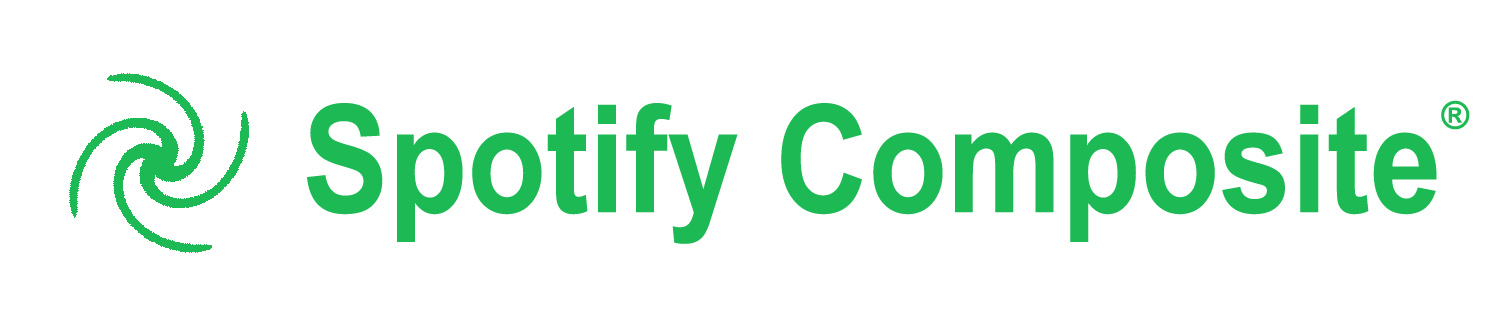
<style>
.page{position:relative;width:1512px;height:324px;background:#ffffff}
.page>*{position:absolute;margin:0}
.t1{font:149.8px "ArialNarrow-Bold";color:#1db954;scale:1.05 1}
.t2{font:65px "ArialNarrow-Bold";color:#1db954;scale:1.2 1}
</style>
<div class="page">
<p class="t1" style="left:307px;top:100px;width:1163px;height:144px">Spotify Composite<span class="t2">®</span></p>
</div>
